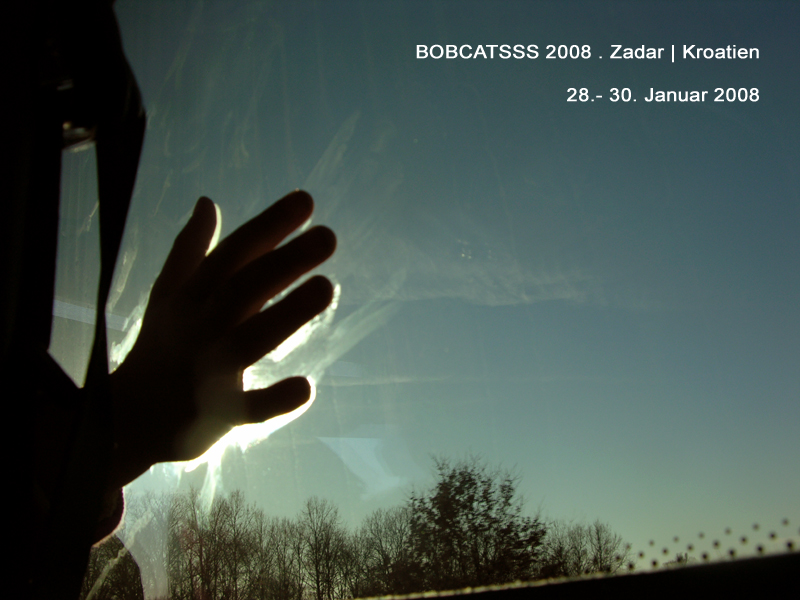
<style>
.page{position:relative;width:800px;height:600px}
.page>*{position:absolute;margin:0}
.t1{font:18px "ArialMT";color:#ffffff;font-weight:bold;scale:1.1 1}
</style>
<div class="page">
<p class="t1" style="left:416px;top:44px;width:343px;height:58px;text-align:right">BOBCATSSS 2008 . Zadar | Kroatien<br><br>28.- 30. Januar 2008</p>
</div>
